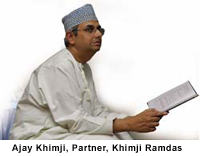
<style>
.page{position:relative;width:200px;height:156px;background:#fefefe}
.page>*{position:absolute;margin:0}
.t1{font:9px "Arial-BoldMT";letter-spacing:0.05em;color:#000000}
</style>
<div class="page">
<p class="t1" style="left:12px;top:144px;width:170px;height:9px">Ajay Khimji, Partner, Khimji Ramdas</p>
</div>
